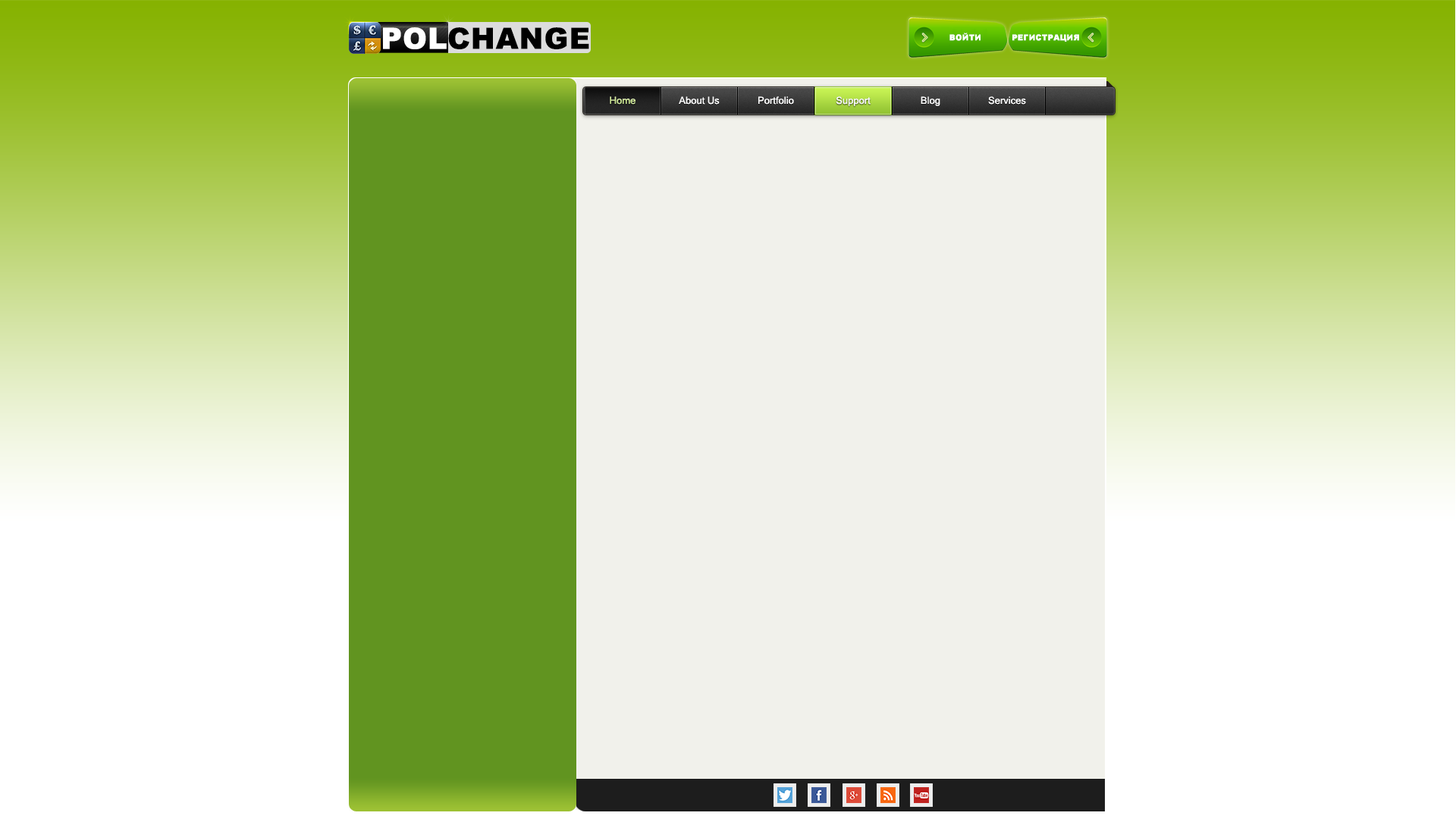
<style>
.page{position:relative;width:1456px;height:819px;background:#f1f1eb}
.page>*{position:absolute;margin:0}
.t1{font:7.9px "Arial-Black";color:#ffffff;text-transform:uppercase;font-weight:bold}
.t2{font:9.9px "MicrosoftSansSerif";color:#cde78e}
.t3{font:9.9px "MicrosoftSansSerif";color:#ffffff}
</style>
<div class="page">
<p class="t1" style="left:949px;top:33px;width:32px;height:8px">ВОЙТИ</p>
<p class="t1" style="left:1012px;top:34px;width:67px;height:8px">Регистрация</p>
<p class="t2" style="left:610px;top:96px;width:25px;height:9px">Home</p>
<p class="t3" style="left:679px;top:96px;width:41px;height:9px">About Us</p>
<p class="t3" style="left:758px;top:96px;width:36px;height:9px">Portfolio</p>
<p class="t3" style="left:836px;top:96px;width:35px;height:10px">Support</p>
<p class="t3" style="left:921px;top:96px;width:19px;height:10px">Blog</p>
<p class="t3" style="left:988px;top:96px;width:38px;height:9px">Services</p>
</div>
